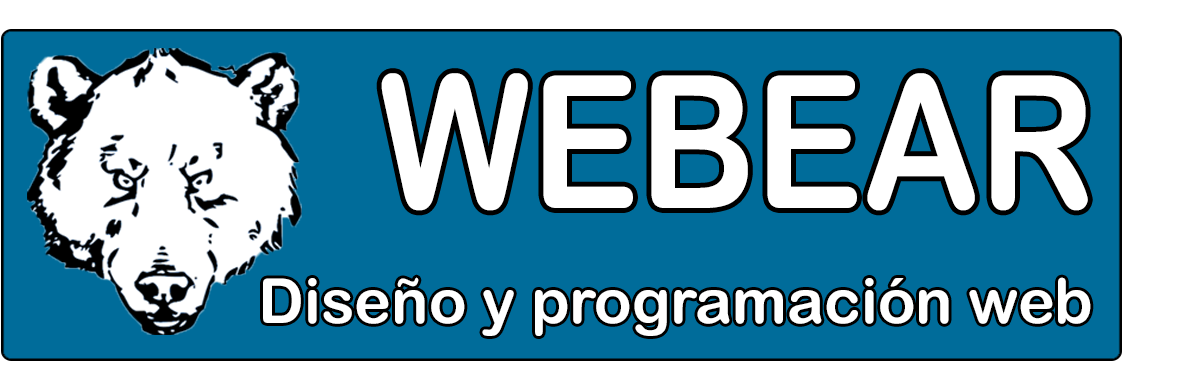
<style>
.page{position:relative;width:1200px;height:376px;background:#006c9a}
.page>*{position:absolute;margin:0}
.t1{font:185px "ArialRoundedMTBold";color:#ffffff;scale:0.87 1}
.t2{font:62.3px "ArialRoundedMTBold";color:#ffffff}
</style>
<div class="page">
<p class="t1" style="left:381px;top:73px;width:707px;height:138px">WEBEAR</p>
<p class="t2" style="left:263px;top:277px;width:828px;height:59px">Diseño y programación web</p>
</div>
